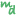
<style>
.page{position:relative;width:16px;height:16px;background:#ffffff}
.page>*{position:absolute;margin:0}
.t1{font:13.6px "BradleyHandITCTTBold";color:#50b16b;font-weight:bold}
</style>
<div class="page">
<p class="t1" style="left:0px;top:1px;width:13px;height:7px">m</p>
<p class="t1" style="left:8px;top:5px;width:8px;height:10px">d</p>
</div>
